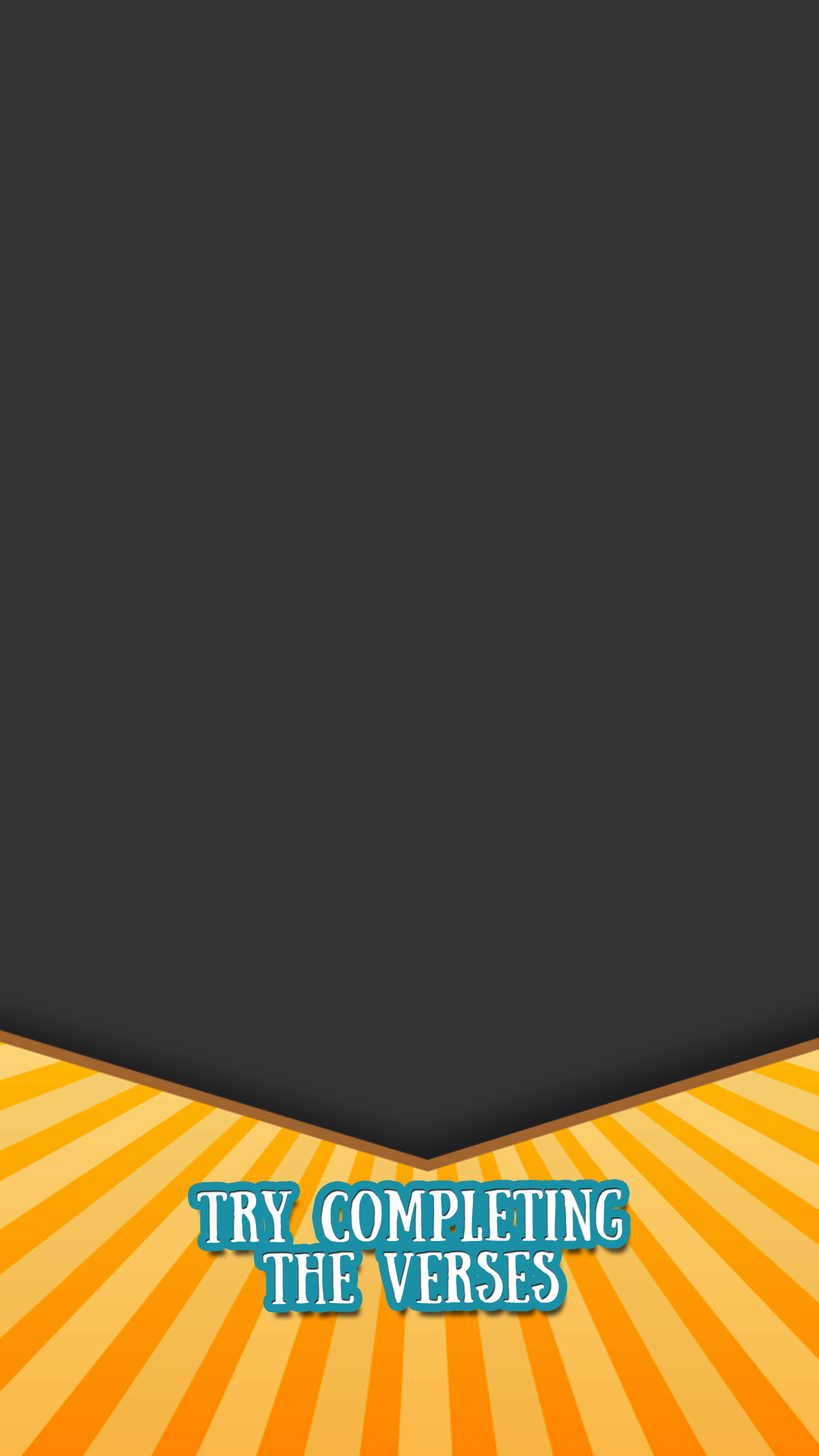
<style>
.page{position:relative;width:819px;height:1456px;background:#333333}
.page>*{position:absolute;margin:0}
.t1{font:51.5px "Sunday-Regular";color:#ffffff;font-weight:bold}
</style>
<div class="page">
<p class="t1" style="left:197px;top:1188px;width:425px;height:116px;text-align:center">Try completing<br>the verses</p>
</div>
